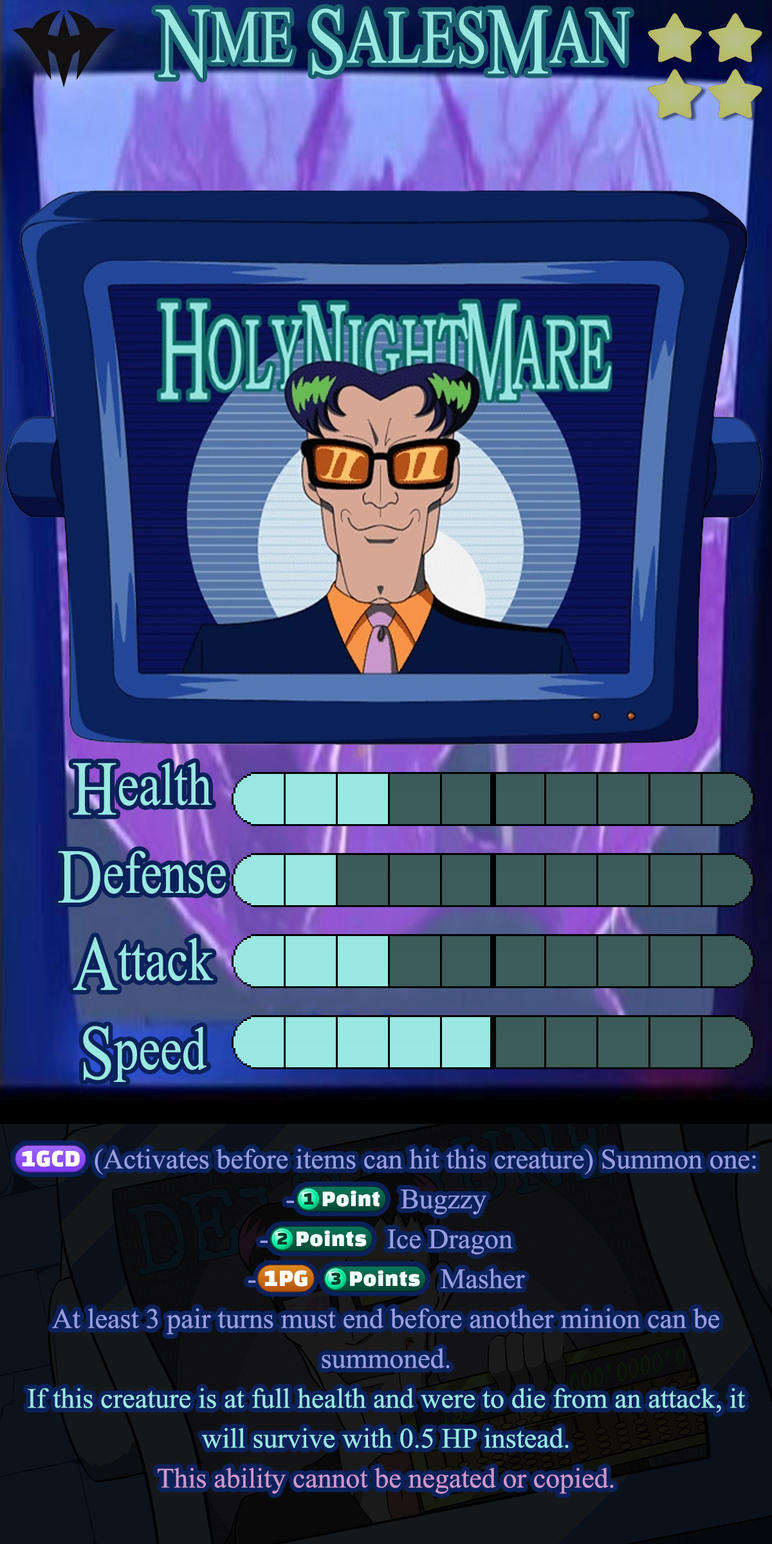
<style>
.page{position:relative;width:772px;height:1544px}
.page>*{position:absolute;margin:0}
.t1{font:131.5px "TimesNewRomanPSMT";color:#99e7e1;scale:0.73 1}
.t2{font:174.5px "TimesNewRomanPSMT";color:#99e7e1;scale:0.73 1}
.t3{font:129.8px "TimesNewRomanPSMT";color:#99e7e1;scale:0.73 1}
.t4{font:163.1px "TimesNewRomanPSMT";color:#99e7e1;scale:0.73 1}
.t5{font:164px "TimesNewRomanPSMT";color:#99e7e1;scale:0.73 1}
.t6{font:103.8px "TimesNewRomanPSMT";color:#99e8e1;scale:0.81 1}
.t7{font:133.2px "TimesNewRomanPSMT";color:#99e8e1;scale:0.81 1}
.t8{font:133.4px "TimesNewRomanPSMT";color:#99e8e1;scale:0.81 1}
.t9{font:48.3px/39.9px "TimesNewRomanPSMT"}
.t10{font:48.3px/39.9px "stoogedings-Regular";letter-spacing:0.25em}
.t11{font:45.4px/39.9px "stoogedings-Regular";letter-spacing:0.25em}
</style>
<div class="page">
<p class="t1" style="left:156px;top:8px;width:474px;height:71px"><span class="t2">N</span><span class="t3">ME </span><span class="t4">S</span>ALES<span class="t5">M</span>AN</p>
<p class="t6" style="left:73px;top:762px;width:139px;height:53px"><span class="t7">H</span>ealth</p>
<p class="t6" style="left:58px;top:851px;width:168px;height:52px"><span class="t7">D</span>efense</p>
<p class="t6" style="left:73px;top:937px;width:141px;height:53px"><span class="t8">A</span>ttack</p>
<p class="t6" style="left:83px;top:1026px;width:124px;height:56px"><span class="t7">S</span>peed</p>
<p class="t9" style="left:15px;top:1145px;width:741px;height:349px;text-align:center"><span class="t10">(1GCD)</span>(Activates before items can hit this creature) Summon one:<br>-<span class="t11">(1 point)</span> Bugzzy<br>-<span class="t11">(2 points)</span> Ice Dragon<br>-<span class="t10">(1PG)</span><span class="t11">(3 points)</span> Masher<br>At least 3 pair turns must end before another minion can be summoned.<br>If this creature is at full health and were to die from an attack, it will survive with 0.5 HP instead.<br>This ability cannot be negated or copied.</p>
</div>
